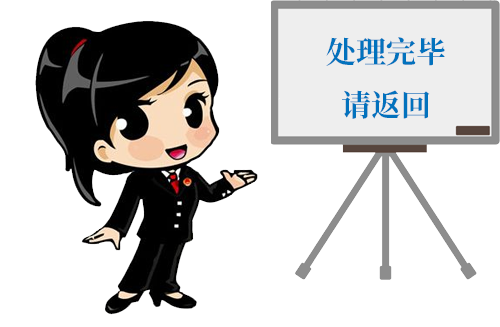
<style>
.page{position:relative;width:500px;height:327px;background:#ffffff}
.page>*{position:absolute;margin:0}
.t1{font:30px "NotoSerifCJKsc-Bold";color:#0272bd}
</style>
<div class="page">
<p class="t1" style="left:326px;top:37px;width:119px;height:82px;text-align:center">处理完毕<br>请返回</p>
</div>
